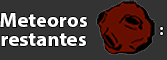
<style>
.page{position:relative;width:167px;height:60px;background:#333333}
.page>*{position:absolute;margin:0}
.t1{font:20.9px "MyriadPro-Bold";color:#ffffff}
.t2{font:20.9px "MyriadPro-Bold";color:#000000}
.t3{font:12px "MyriadPro-Bold";color:#ffffff}
</style>
<div class="page">
<p class="t1" style="left:0px;top:13px;width:87px;height:33px"><span class="t2"><br></span>Meteoros restantes</p>
<p class="t3" style="left:160px;top:27px;width:3px;height:8px">:</p>
</div>
